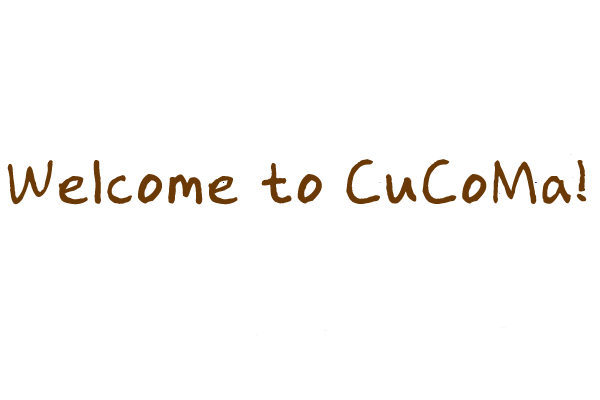
<style>
.page{position:relative;width:600px;height:400px;background:#ffffff}
.page>*{position:absolute;margin:0}
.t1{font:61.1px "AaJoe";color:#6a3906}
</style>
<div class="page">
<p class="t1" style="left:7px;top:159px;width:580px;height:46px">Welcome to CuCoMa!</p>
</div>
